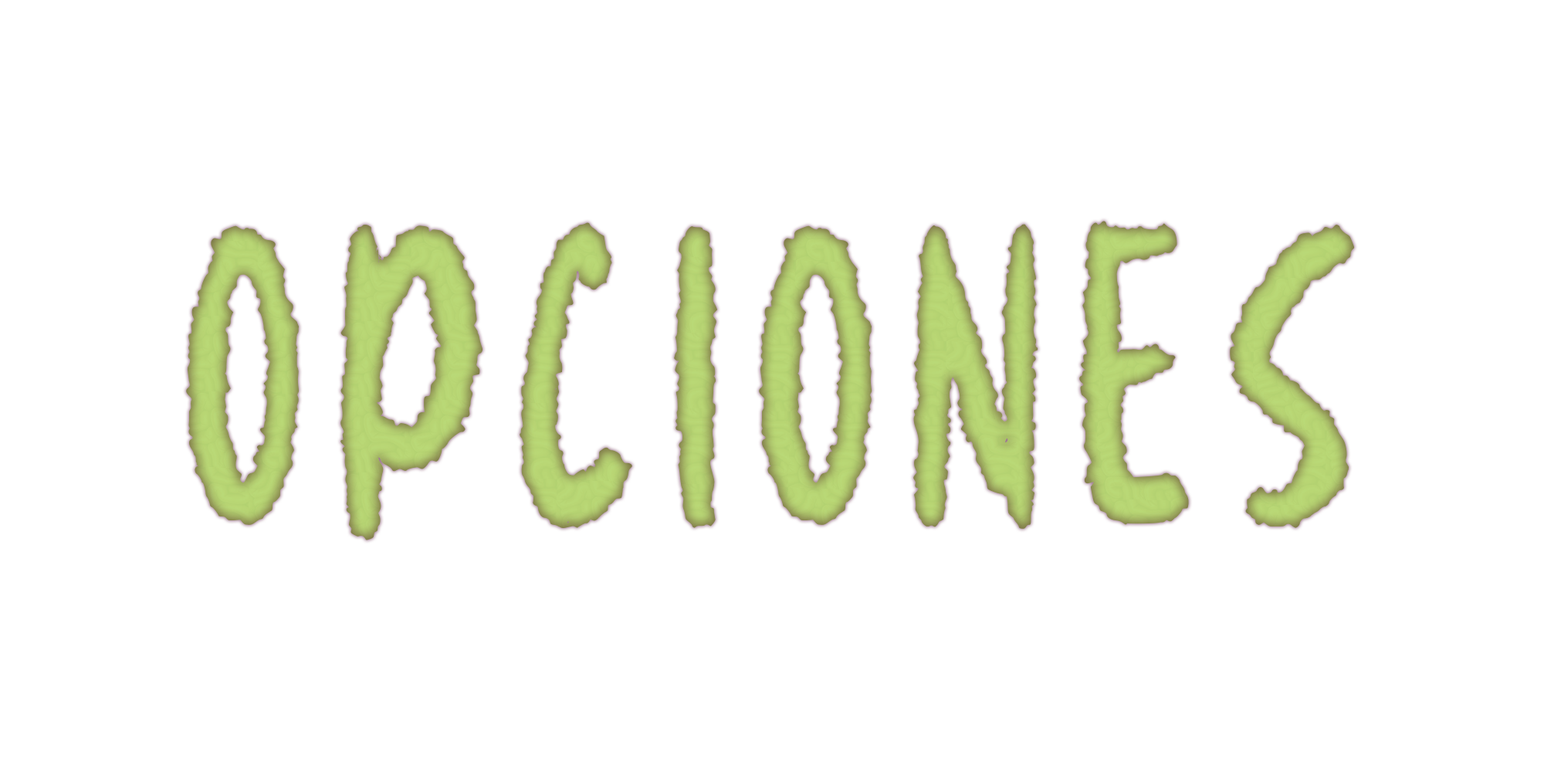
<style>
.page{position:relative;width:1544px;height:772px;background:#ffffff}
.page>*{position:absolute;margin:0}
.t1{font:321.7px "Metalien";letter-spacing:0.1em;color:#b7d974}
</style>
<div class="page">
<p class="t1" style="left:186px;top:221px;width:1169px;height:320px">Opciones</p>
</div>
